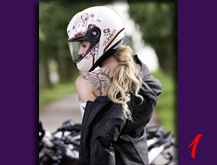
<style>
.page{position:relative;width:217px;height:165px;background:#380f52}
.page>*{position:absolute;margin:0}
.t1{font:48px "Pristina-Regular";color:#ff0000}
</style>
<div class="page">
<p class="t1" style="left:188px;top:134px;width:15px;height:24px">1</p>
</div>
